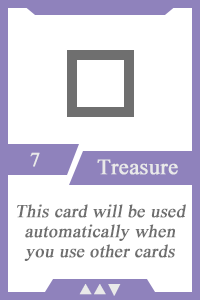
<style>
.page{position:relative;width:200px;height:300px;background:#ffffff}
.page>*{position:absolute;margin:0}
.t1{font:20px "TimesNewRomanPSMT";color:#e9e9e9;font-weight:bold}
.t2{font:22px "TimesNewRomanPSMT";color:#e9e9e9;font-weight:bold}
.t3{font:18px/20px "TimesNewRomanPSMT";color:#6f6f6f;font-weight:bold;font-style:italic}
.t4{font:14px "AdobeHeitiStd-Regular";color:#e9e9e9;font-weight:bold}
</style>
<div class="page">
<p class="t1" style="left:30px;top:152px;width:10px;height:15px">7</p>
<p class="t2" style="left:97px;top:159px;width:81px;height:16px">Treasure</p>
<p class="t3" style="left:17px;top:204px;width:169px;height:57px;text-align:center">This card will be used automatically when you use other cards</p>
<p class="t4" style="left:79px;top:284px;width:42px;height:12px">▲▲▼</p>
</div>
